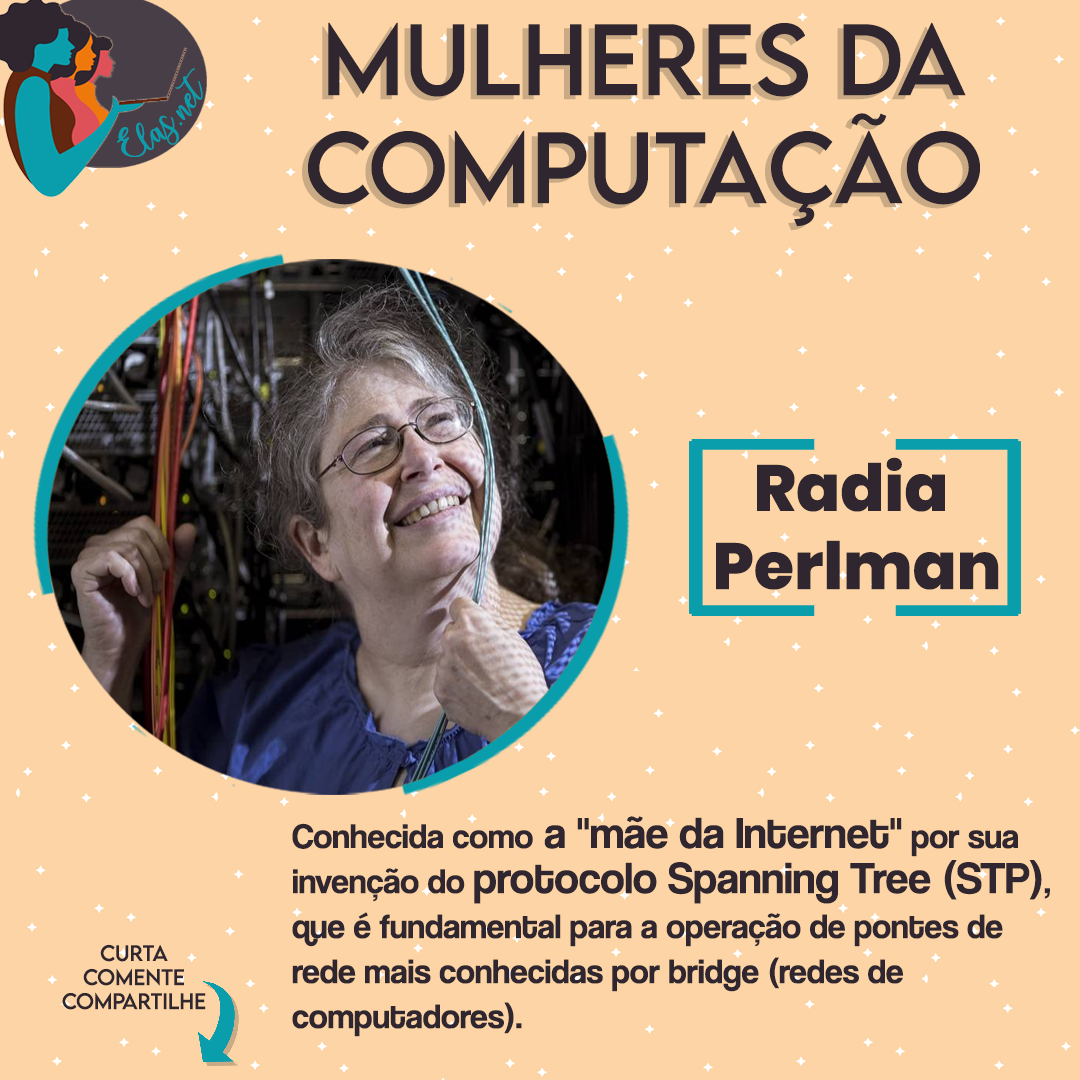
<style>
.page{position:relative;width:1080px;height:1080px;background:#fcd4a5}
.page>*{position:absolute;margin:0}
.t1{font:90px "LEMONMILK-Regular"}
.t2{font:90px "LEMONMILK-Regular";color:#2f262f}
.t3{font:25px "charlinda-Regular";color:#0a9eac;scale:1.18 1}
.t4{font:65px "Poppins-ExtraBold";color:#2f262f}
.t5{font:35px/45px "CoolveticaRg-Regular";color:#2f262f}
.t6{font:45px/45px "CoolveticaRg-Regular";color:#2f262f}
.t7{font:20px "LEMONMILK-Regular";color:#2f262f}
</style>
<div class="page">
<p class="t1" style="left:302px;top:26px;width:672px;height:205px;text-align:center">Mulheres da<br>Computação</p>
<p class="t2" style="left:308px;top:22px;width:672px;height:205px;text-align:center">Mulheres da<br>Computação</p>
<p class="t3" style="left:117px;top:68px;width:86px;height:89px;rotate:-43deg">Elas.net</p>
<p class="t4" style="left:716px;top:457px;width:283px;height:133px;text-align:center">Radia <br>Perlman</p>
<p class="t5" style="left:292px;top:816px;width:758px;height:221px">Conhecida como<span class="t6"> a "mãe da Internet"</span> por sua <br>invenção do <span class="t6">protocolo Spanning Tree (STP)</span>, <br>que é fundamental para a operação de pontes de <br>rede mais conhecidas por bridge (redes de <br>computadores).</p>
<p class="t7" style="left:62px;top:944px;width:144px;height:66px;text-align:center">Curta<br>Comente<br>Compartilhe</p>
</div>
